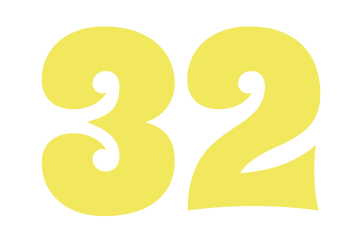
<style>
.page{position:relative;width:354px;height:236px;background:#ffffff}
.page>*{position:absolute;margin:0}
.t1{font:250px "SpicyRice-Regular";color:#f2e85e}
</style>
<div class="page">
<p class="t1" style="left:41px;top:26px;width:280px;height:191px">32</p>
</div>
